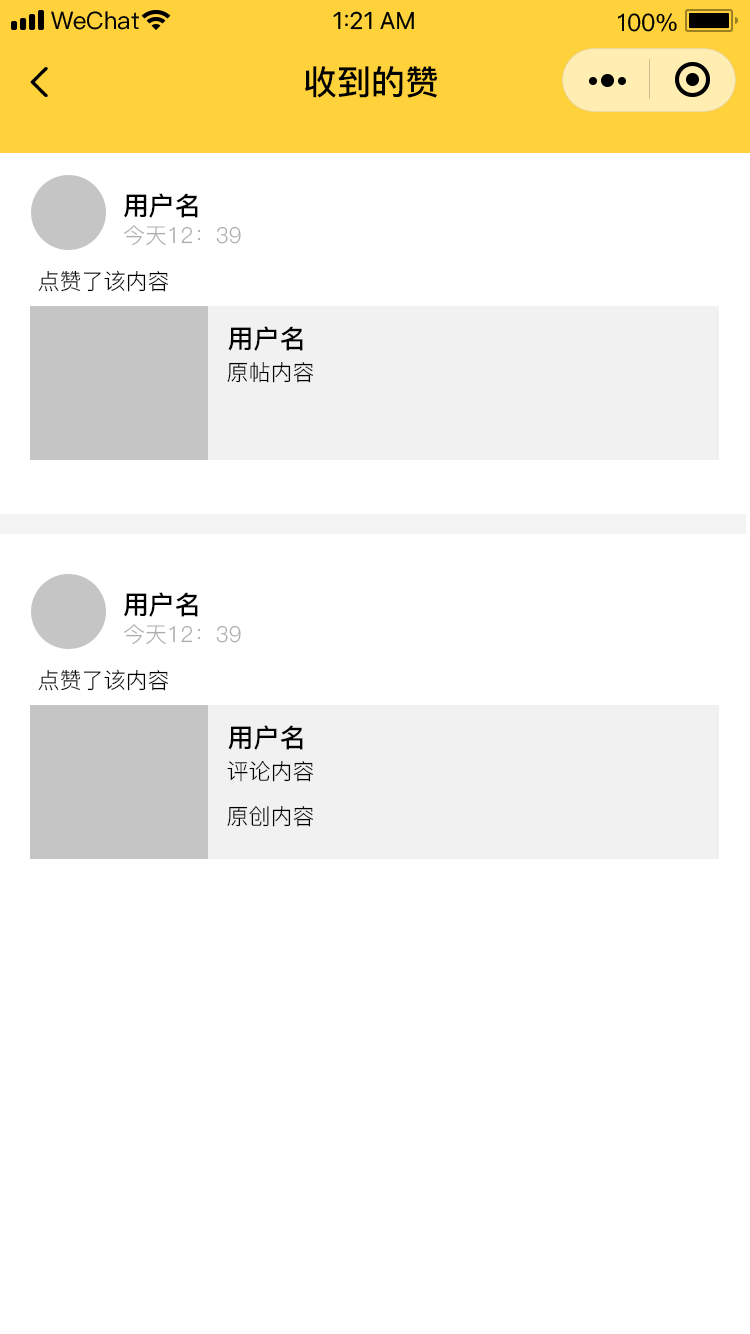
<style>
.page{position:relative;width:750px;height:1334px;background:#ffffff}
.page>*{position:absolute;margin:0}
.t1{font:34px "PingFang-SC-Bold";color:#000000}
.t2{font:26px "PingFang-SC-Bold";color:#000000}
.t3{font:22px "PingFang-SC-Regular";color:#adadad}
.t4{font:22px "PingFang-SC-Regular";color:#000000}
</style>
<div class="page">
<p class="t1" style="left:305px;top:66px;width:133px;height:32px">收到的赞</p>
<p class="t2" style="left:124px;top:193px;width:74px;height:25px">用户名</p>
<p class="t3" style="left:124px;top:225px;width:117px;height:21px">今天12：39</p>
<p class="t4" style="left:38px;top:270px;width:131px;height:22px">点赞了该内容</p>
<p class="t2" style="left:228px;top:326px;width:75px;height:25px">用户名</p>
<p class="t4" style="left:227px;top:362px;width:87px;height:21px">原帖内容</p>
<p class="t2" style="left:124px;top:592px;width:74px;height:25px">用户名</p>
<p class="t3" style="left:124px;top:624px;width:117px;height:21px">今天12：39</p>
<p class="t4" style="left:38px;top:669px;width:131px;height:22px">点赞了该内容</p>
<p class="t2" style="left:228px;top:725px;width:75px;height:25px">用户名</p>
<p class="t4" style="left:227px;top:760px;width:87px;height:67px">评论内容<br><br>原创内容</p>
</div>
